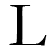
<style>
.page{position:relative;width:50px;height:50px;background:#ffffff}
.page>*{position:absolute;margin:0}
.t1{font:65px "Garamond";color:#000000}
</style>
<div class="page">
<p class="t1" style="left:9px;top:5px;width:38px;height:41px">L</p>
</div>
